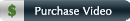
<style>
.page{position:relative;width:130px;height:21px}
.page>*{position:absolute;margin:0}
.t1{font:14px "Optima-ExtraBlack";color:#487428;font-weight:bold}
.t2{font:11px "Optima-Regular";color:#ffffff;font-weight:bold}
</style>
<div class="page">
<p class="t1" style="left:8px;top:4px;width:8px;height:14px">$</p>
<p class="t2" style="left:35px;top:6px;width:77px;height:9px">Purchase Video</p>
</div>
